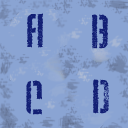
<style>
.page{position:relative;width:128px;height:128px;background:#8aa4d3}
.page>*{position:absolute;margin:0}
.t1{font:48px "WeltronUrban";letter-spacing:0.05em;color:#132075}
</style>
<div class="page">
<p class="t1" style="left:27px;top:13px;width:16px;height:35px">A</p>
<p class="t1" style="left:92px;top:14px;width:16px;height:35px">B</p>
<p class="t1" style="left:26px;top:80px;width:16px;height:35px">C</p>
<p class="t1" style="left:93px;top:79px;width:16px;height:35px">D</p>
</div>
